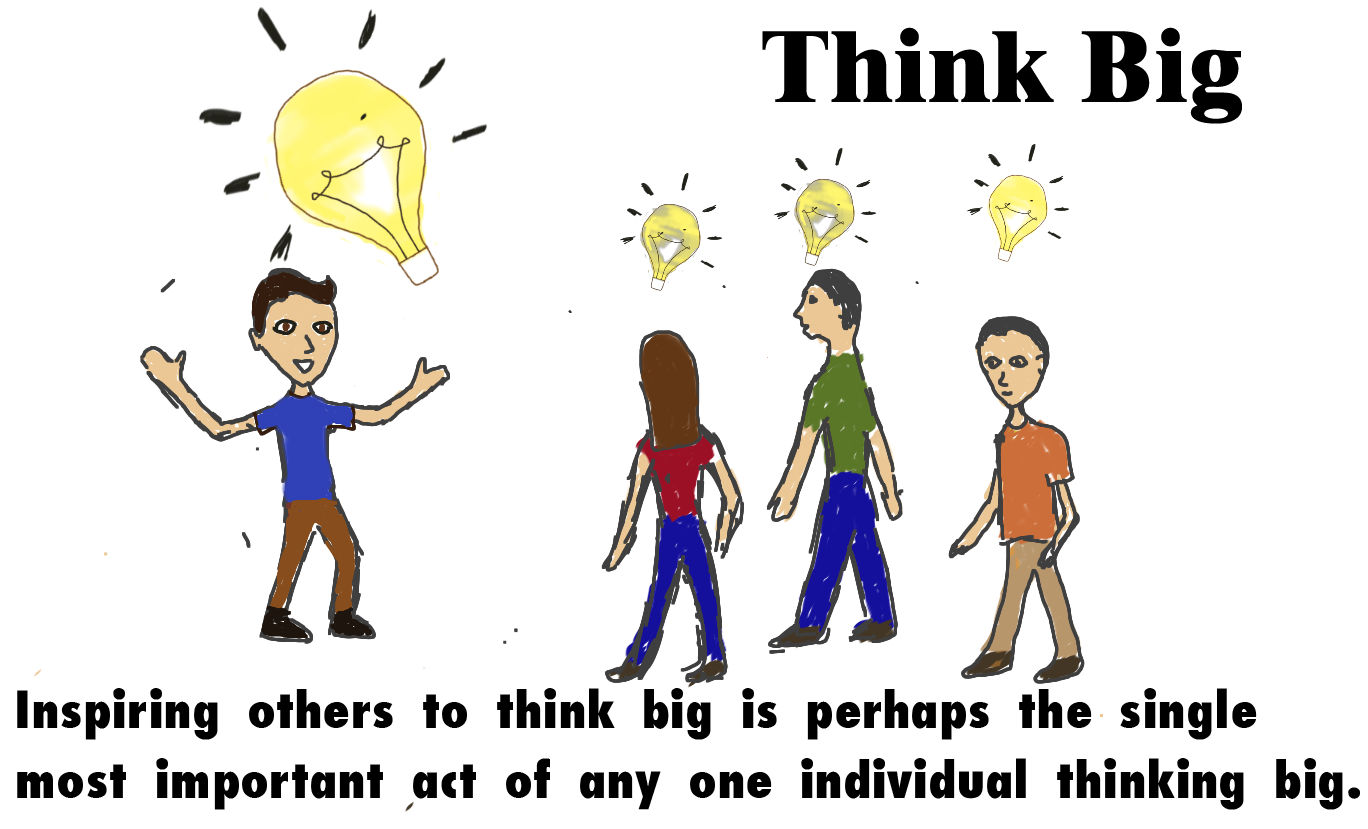
<style>
.page{position:relative;width:1368px;height:829px;background:#ffffff}
.page>*{position:absolute;margin:0}
.t1{font:104.2px "Dutch801BT-ExtraBold";color:#000000}
.t2{font:58.3px "Futura-CondensedExtraBold-Th";color:#000000}
</style>
<div class="page">
<p class="t1" style="left:762px;top:27px;width:480px;height:97px">Think Big</p>
<p class="t2" style="left:17px;top:688px;width:1343px;height:122px">Inspiring others to think big is perhaps the single <br>most important act of any one individual thinking big.</p>
</div>
